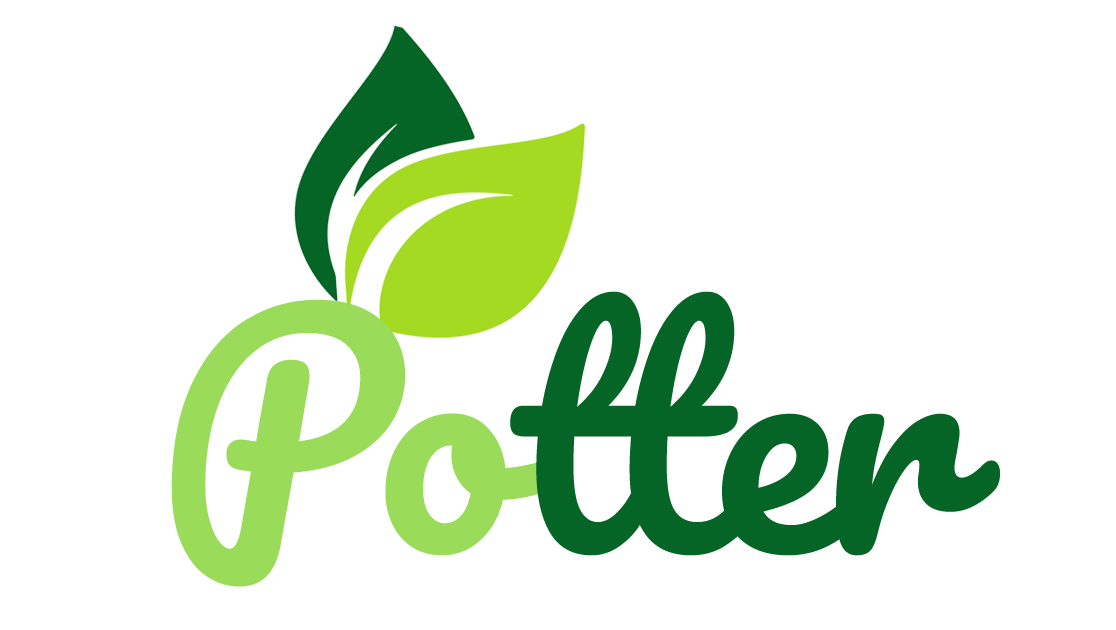
<style>
.page{position:relative;width:1116px;height:630px;background:#ffffff}
.page>*{position:absolute;margin:0}
.t1{font:300px "Pacifico-Regular";letter-spacing:-0.03em;color:#056526}
.t2{font:300px "Pacifico-Regular";letter-spacing:-0.03em;color:#9adb5a}
</style>
<div class="page">
<p class="t1" style="left:171px;top:291px;width:829px;height:296px"><span class="t2">Po</span>tter</p>
</div>
